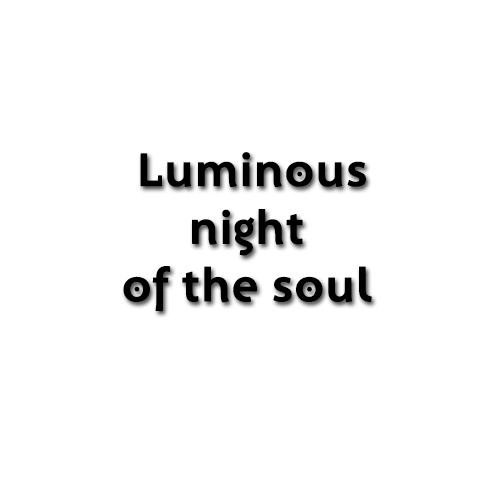
<style>
.page{position:relative;width:500px;height:500px;background:#ffffff}
.page>*{position:absolute;margin:0}
.t1{font:48px "Santana-Bold";color:#000000;font-weight:bold}
</style>
<div class="page">
<p class="t1" style="left:123px;top:152px;width:249px;height:160px;text-align:center">Luminous <br>night<br>of the soul</p>
</div>
